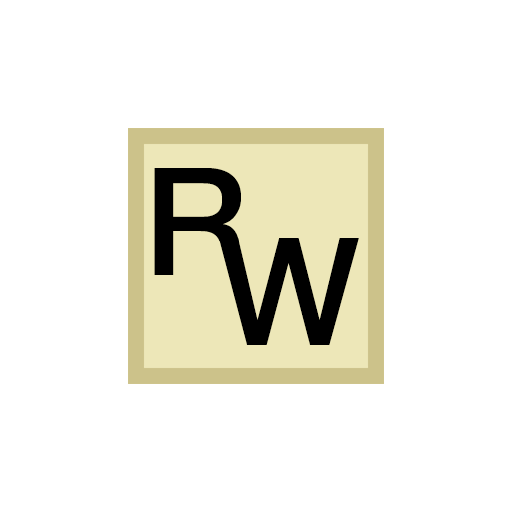
<style>
.page{position:relative;width:512px;height:512px;background:#ffffff}
.page>*{position:absolute;margin:0}
.t1{font:150px "HelveticaNeue-Medium";color:#000000}
</style>
<div class="page">
<p class="t1" style="left:154px;top:168px;width:91px;height:107px">R</p>
<p class="t1" style="left:219px;top:238px;width:140px;height:107px">W</p>
</div>
